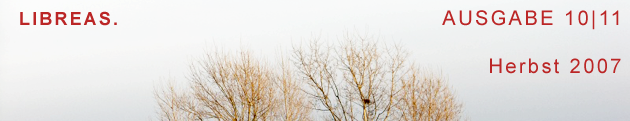
<style>
.page{position:relative;width:630px;height:121px}
.page>*{position:absolute;margin:0}
.t1{font:20px "ArialMT";letter-spacing:0.12em;color:#bb2626}
.t2{font:18px "Arial-BoldMT";letter-spacing:0.12em;color:#bb2626}
</style>
<div class="page">
<p class="t1" style="left:20px;top:10px;width:601px;height:64px"><span class="t2">LIBREAS.                                             </span>AUSGABE 10|11 <br>                                                           <br>                                                           Herbst 2007</p>
</div>
